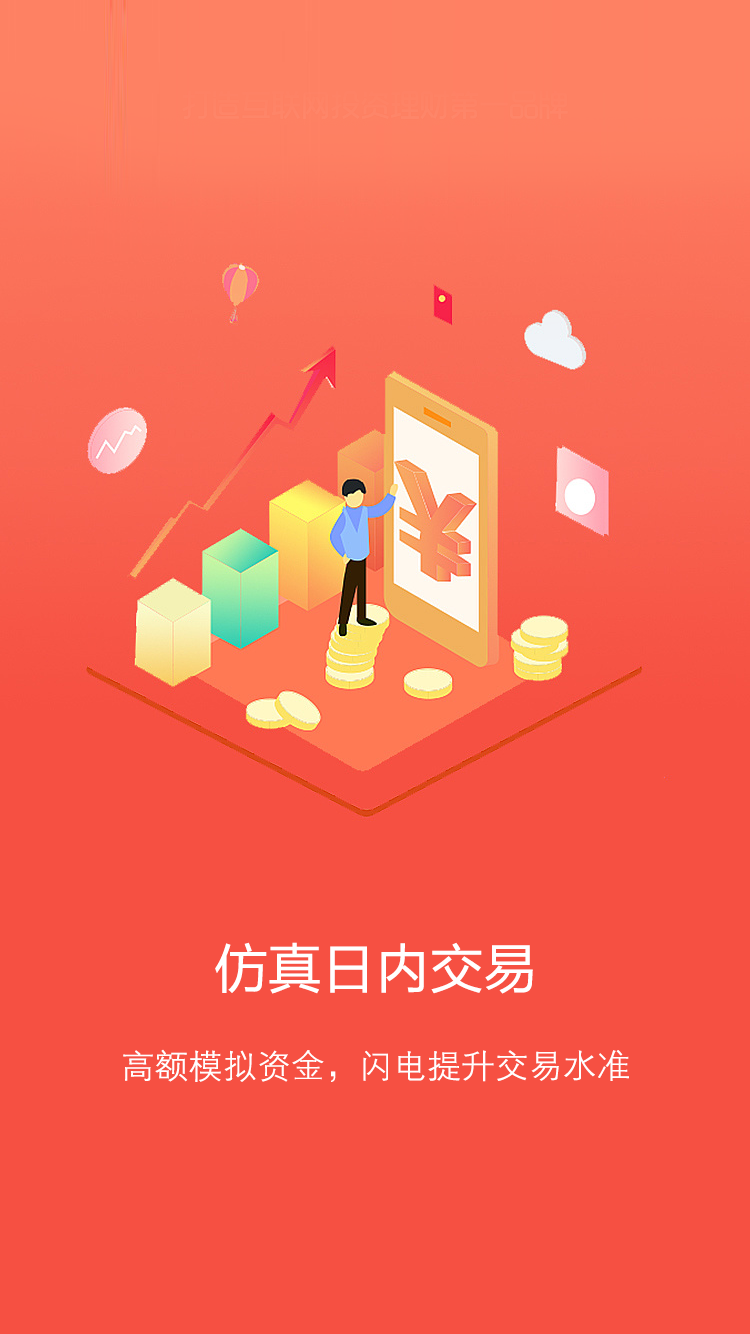
<style>
.page{position:relative;width:750px;height:1334px;background:#f65042}
.page>*{position:absolute;margin:0}
.t1{font:54px "FZLTHJW--GB1-0";color:#ffffff}
.t2{font:34px "FZXH1K--GBK1-0";color:#ffffff}
</style>
<div class="page">
<p class="t1" style="left:215px;top:942px;width:318px;height:52px">仿真日内交易</p>
<p class="t2" style="left:123px;top:1049px;width:506px;height:33px">高额模拟资金，闪电提升交易水准</p>
</div>
